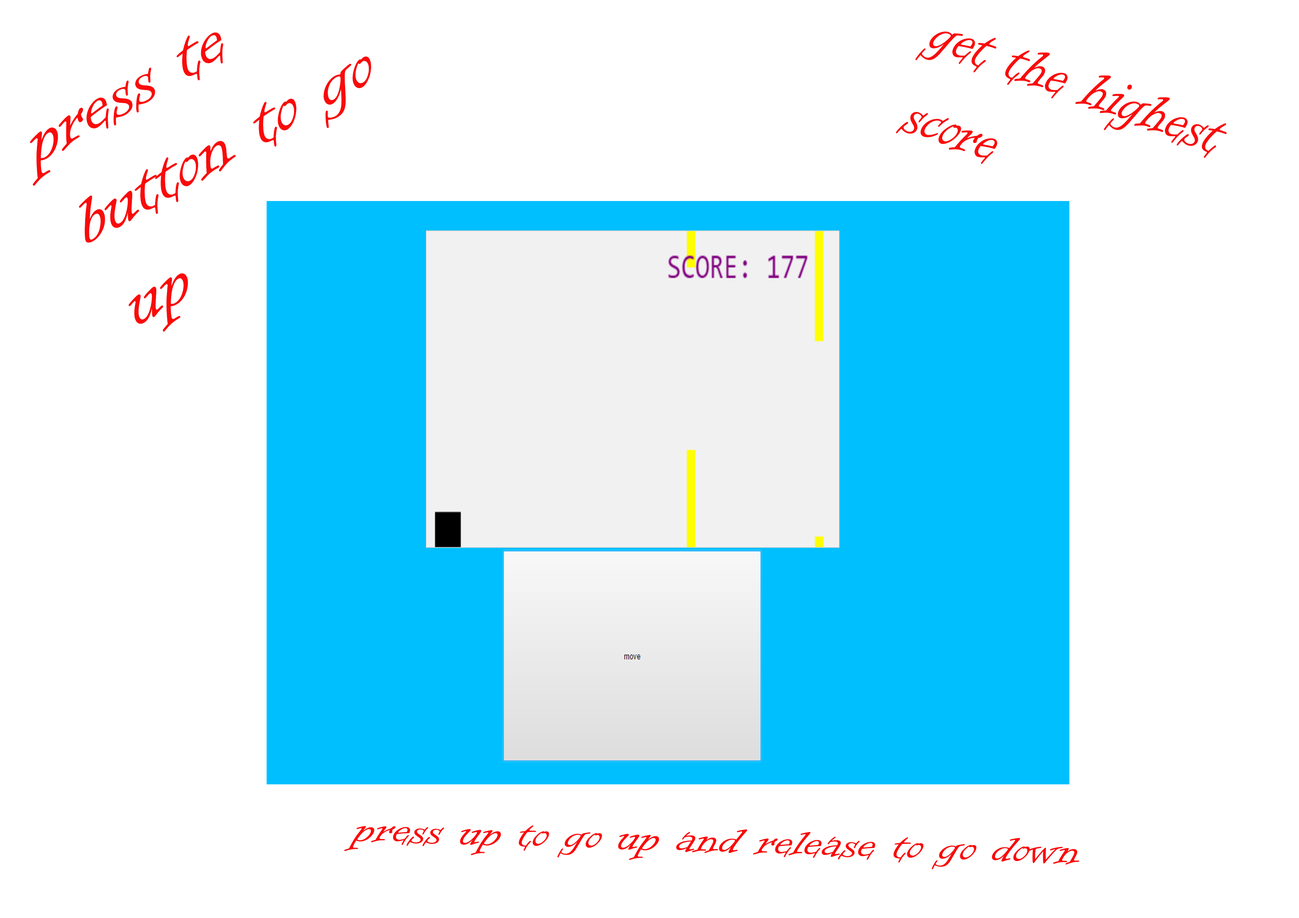
<style>
.page{position:relative;width:1299px;height:918px;background:#ffffff}
.page>*{position:absolute;margin:0}
.t1{font:79.6px "InformalRoman-Regular";color:#fa0a0a}
.t2{font:71.8px "InformalRoman-Regular";color:#fa0a0a;scale:0.8 1}
.t3{font:46.3px "InformalRoman-Regular";color:#fa0a0a;scale:1.08 1}
</style>
<div class="page">
<p class="t1" style="left:30px;top:32px;width:341px;height:300px;rotate:-30deg">press te button to go up</p>
<p class="t2" style="left:896px;top:31px;width:331px;height:133px;rotate:20deg">get the highest score</p>
<p class="t3" style="left:344px;top:825px;width:735px;height:45px;rotate:2deg">press up to go up and release to go down</p>
</div>
